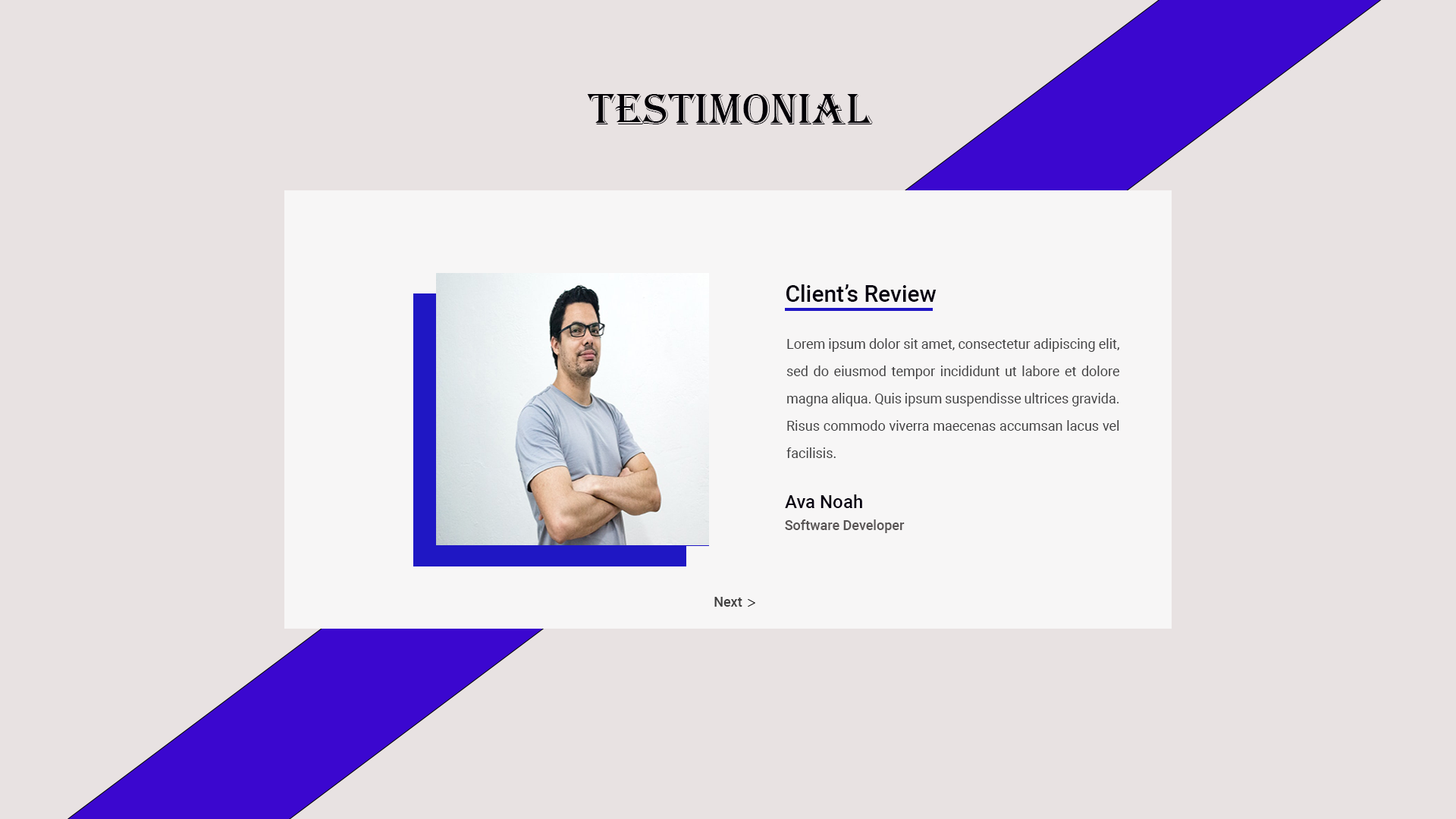
<style>
.page{position:relative;width:1456px;height:819px;background:#e8e2e2}
.page>*{position:absolute;margin:0}
.t1{font:45.5px "Algerian";color:#020006}
.t2{font:22.7px "Roboto-Medium";color:#060110}
.t3{font:13.6px/27.3px "Roboto-Regular";color:#404041}
.t4{font:18.2px "Roboto-Medium";color:#060110}
.t5{font:13.6px "Roboto-Medium";color:#585454}
.t6{font:13.6px "Roboto-Medium";color:#403f3f}
</style>
<div class="page">
<p class="t1" style="left:587px;top:94px;width:286px;height:30px">Testimonial</p>
<p class="t2" style="left:786px;top:284px;width:151px;height:18px">Client’s Review</p>
<p class="t3" style="left:786px;top:338px;width:333px;height:120px;text-align:justify">Lorem ipsum dolor sit amet, consectetur adipiscing elit, sed do eiusmod tempor incididunt ut labore et dolore magna aliqua. Quis ipsum suspendisse ultrices gravida. Risus commodo viverra maecenas accumsan lacus vel facilisis.</p>
<p class="t4" style="left:785px;top:494px;width:77px;height:14px">Ava Noah</p>
<p class="t5" style="left:785px;top:519px;width:120px;height:14px">Software Developer</p>
<p class="t6" style="left:714px;top:597px;width:28px;height:10px">Next</p>
</div>
